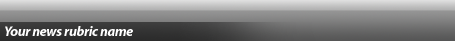
<style>
.page{position:relative;width:455px;height:41px}
.page>*{position:absolute;margin:0}
.t1{font:14px "Myriad-BoldItalic";letter-spacing:-0.025em;color:#ffffff}
</style>
<div class="page">
<p class="t1" style="left:5px;top:26px;width:128px;height:10px">Your news rubric name</p>
</div>
